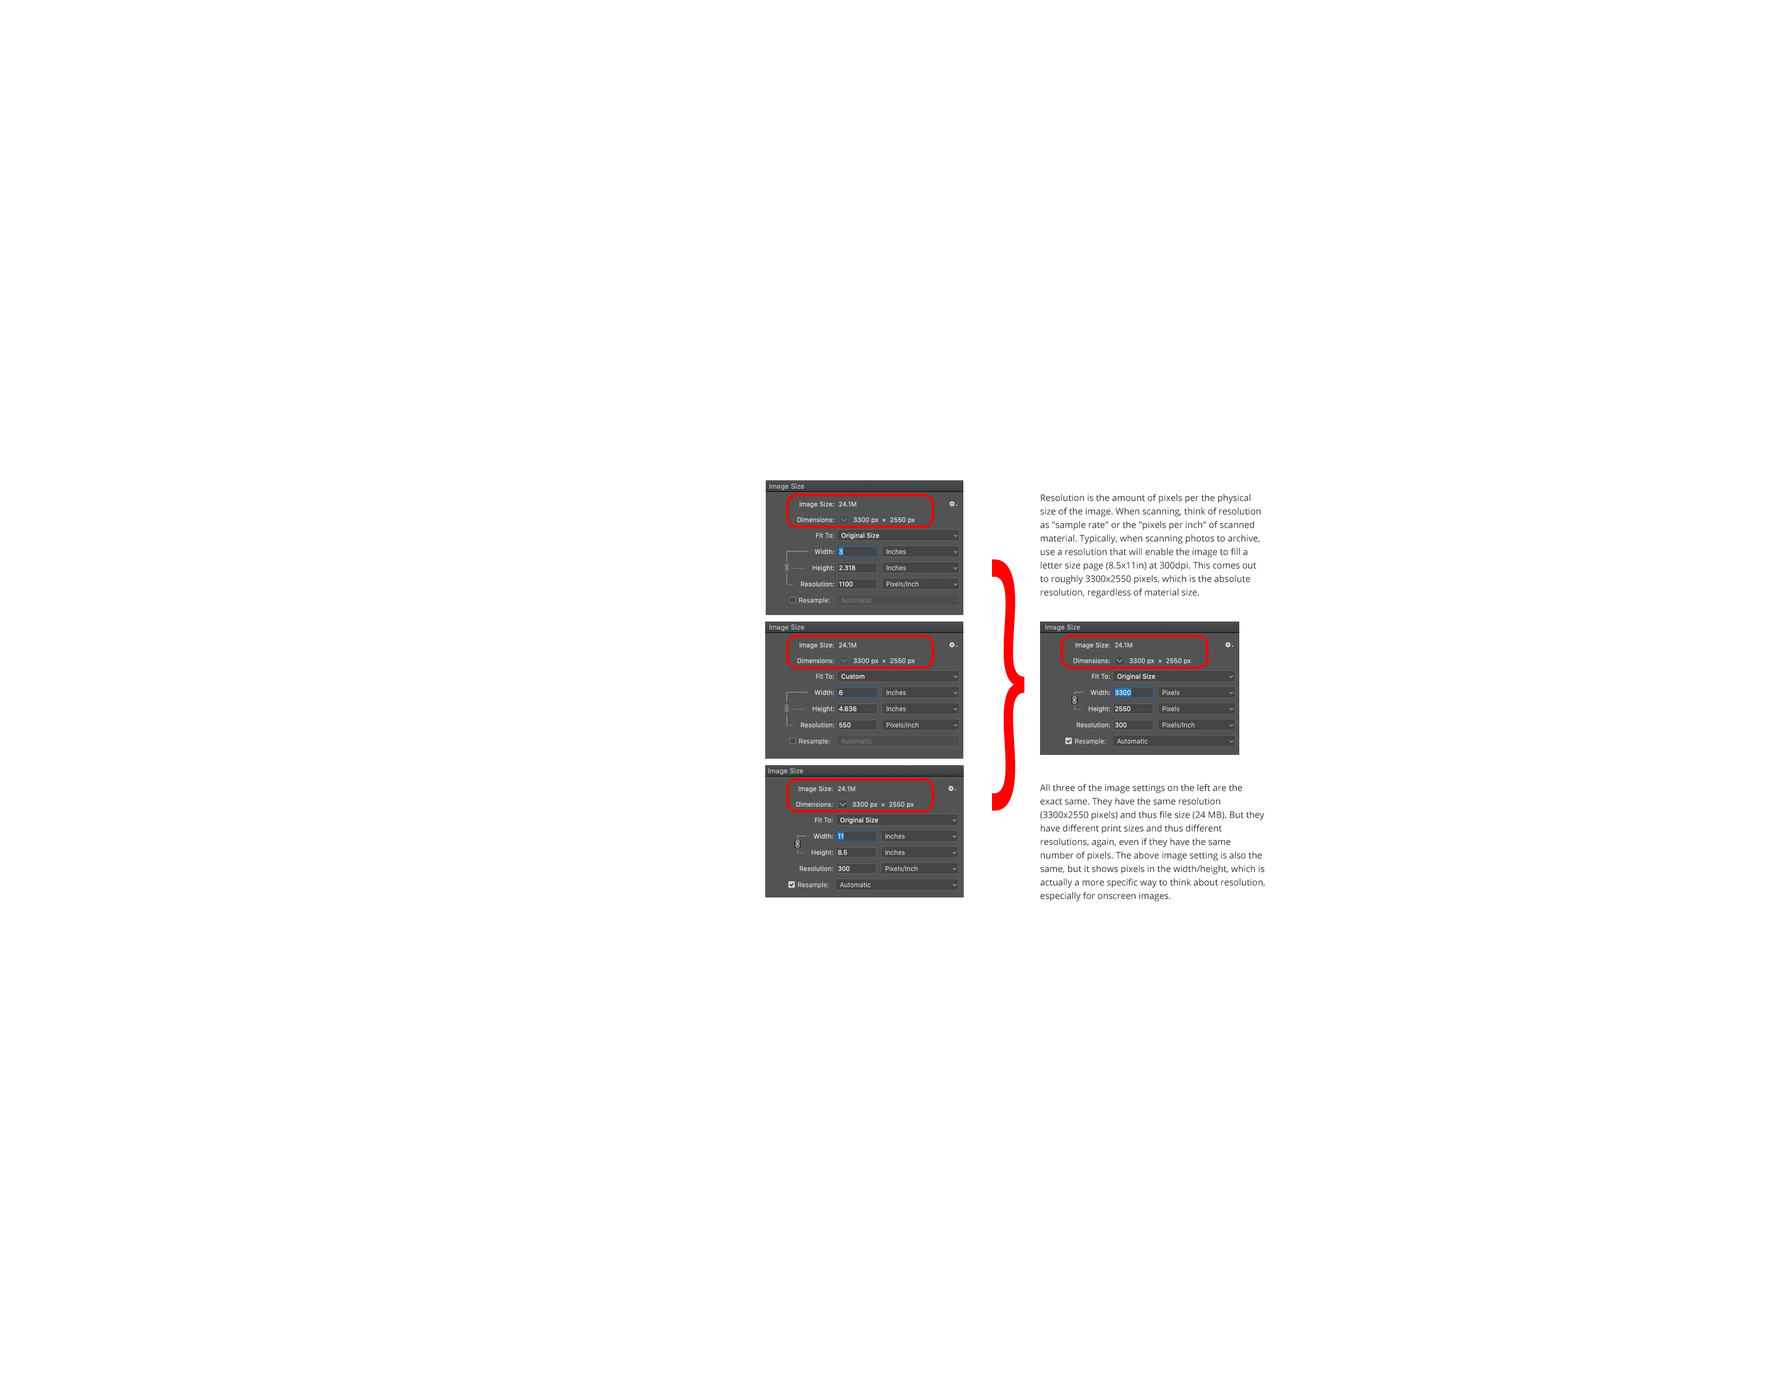
<style>
.page{position:relative;width:1782px;height:1377px;background:#ffffff}
.page>*{position:absolute;margin:0}
.t1{font:9px/13.5px "OpenSans-Regular";color:#262626}
.t2{font:315.2px "MyriadPro-Regular";color:#ff0101;scale:0.44 1}
</style>
<div class="page">
<p class="t1" style="left:1040px;top:494px;width:221px;height:104px">Resolution is the amount of pixels per the physical size of the image. When scanning, think of resolution as "sample rate" or the "pixels per inch" of scanned material. Typically, when scanning photos to archive, use a resolution that will enable the image to fill a letter size page (8.5x11in) at 300dpi. This comes out to roughly 3300x2550 pixels, which is the absolute resolution, regardless of material size.</p>
<p class="t2" style="left:992px;top:559px;width:32px;height:252px">}</p>
<p class="t1" style="left:1040px;top:784px;width:225px;height:117px">All three of the image settings on the left are the exact same. They have the same resolution (3300x2550 pixels) and thus file size (24 MB). But they have different print sizes and thus different resolutions, again, even if they have the same number of pixels. The above image setting is also the same, but it shows pixels in the width/height, which is actually a more specific way to think about resolution, especially for onscreen images.</p>
</div>
